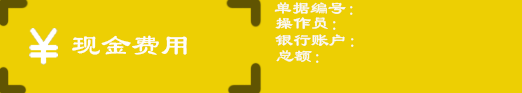
<style>
.page{position:relative;width:522px;height:93px;background:#edcf03}
.page>*{position:absolute;margin:0}
.t1{font:18px "LiSu";color:#faf9f6}
.t2{font:30px "LiSu";color:#fefdf9}
</style>
<div class="page">
<p class="t1" style="left:274px;top:2px;width:79px;height:13px">单据编号：</p>
<p class="t1" style="left:275px;top:17px;width:61px;height:13px">操作员：</p>
<p class="t2" style="left:72px;top:35px;width:115px;height:20px">现金费用</p>
<p class="t1" style="left:275px;top:34px;width:79px;height:13px">银行账户：</p>
<p class="t1" style="left:276px;top:50px;width:43px;height:13px">总额：</p>
</div>
